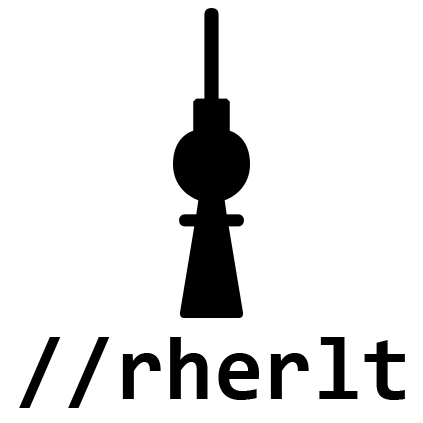
<style>
.page{position:relative;width:423px;height:423px;background:#ffffff}
.page>*{position:absolute;margin:0}
.t1{font:90px "Consolas-Bold";color:#000000}
</style>
<div class="page">
<p class="t1" style="left:19px;top:337px;width:386px;height:71px">//rherlt</p>
</div>
